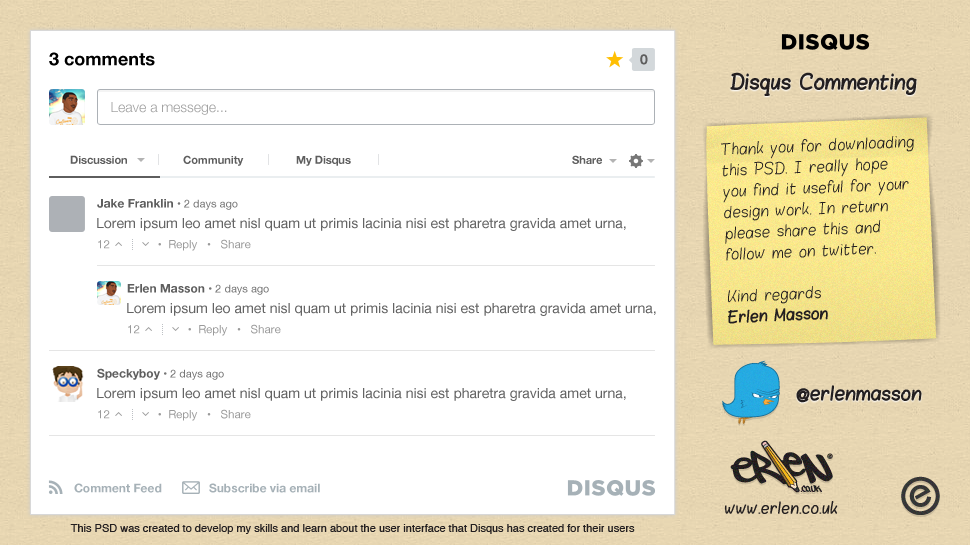
<style>
.page{position:relative;width:970px;height:545px;background:#ffffff}
.page>*{position:absolute;margin:0}
.t1{font:18px "HelveticaNeue-Bold";color:#000000}
.t2{font:14px "HelveticaNeue-Bold";color:#5e5e5e}
.t3{font:17px "Blokletters-Viltstift";letter-spacing:-0.005em;color:#231f20}
.t4{font:14px "HelveticaNeue-Light";color:#a2a2a2}
.t5{font:13px/21px "Blokletters-Balpen";letter-spacing:-0.005em;color:#231f20}
.t6{font:13px/21px "Blokletters-Viltstift";letter-spacing:-0.005em;color:#231f20}
.t7{font:11px "HelveticaNeue-Bold";color:#5e5e5e}
.t8{font:12px "HelveticaNeue-Bold";color:#5e5e5e}
.t9{font:11px "HelveticaNeue";color:#777777}
.t10{font:14px "HelveticaNeue";color:#646464}
.t11{font:11.5px "HelveticaNeue";color:#9a9a9a}
.t12{font:15.8px "Blokletters-Viltstift";letter-spacing:-0.005em;color:#231f20}
.t13{font:12px "HelveticaNeue-Bold";color:#a6b1b7}
.t14{font:13px "Blokletters-Balpen";letter-spacing:-0.005em;color:#231f20;font-weight:bold}
.t15{font:13px "Blokletters-Balpen";letter-spacing:-0.005em;color:#231f20}
.t16{font:11px "Helvetica";color:#231f20}
</style>
<div class="page">
<p class="t1" style="left:49px;top:52px;width:106px;height:14px">3 comments</p>
<p class="t2" style="left:640px;top:54px;width:8px;height:11px">0</p>
<p class="t3" style="left:730px;top:72px;width:187px;height:24px">Disqus Commenting</p>
<p class="t4" style="left:111px;top:102px;width:116px;height:13px">Leave a messege...</p>
<p class="t5" style="left:721px;top:136px;width:193px;height:188px;rotate:-2deg">Thank you for downloading this PSD. I really hope you find it useful for your design work. In return please share this and follow me on twitter.<br><br>Kind regards<br><span class="t6">Erlen Masson</span></p>
<p class="t7" style="left:70px;top:155px;width:57px;height:9px">Discussion</p>
<p class="t7" style="left:183px;top:155px;width:61px;height:11px">Community</p>
<p class="t7" style="left:296px;top:155px;width:55px;height:11px">My Disqus</p>
<p class="t7" style="left:572px;top:155px;width:30px;height:9px">Share</p>
<p class="t8" style="left:97px;top:199px;width:141px;height:11px">Jake Franklin <span class="t9">• 2 days ago</span></p>
<p class="t10" style="left:97px;top:218px;width:529px;height:13px">Lorem ipsum leo amet nisl quam ut primis lacinia nisi est pharetra gravida amet urna, taciti eros lectus arcu malesuada</p>
<p class="t11" style="left:98px;top:239px;width:153px;height:12px">12               •  Reply   •   Share</p>
<p class="t8" style="left:127px;top:284px;width:142px;height:11px">Erlen Masson <span class="t9">• 2 days ago</span></p>
<p class="t10" style="left:127px;top:303px;width:529px;height:13px">Lorem ipsum leo amet nisl quam ut primis lacinia nisi est pharetra gravida amet urna, taciti eros lectus arcu malesuada</p>
<p class="t11" style="left:128px;top:324px;width:153px;height:12px">12               •  Reply   •   Share</p>
<p class="t9" style="left:97px;top:368px;width:127px;height:12px"><span class="t8">Speckyboy </span>• 2 days ago</p>
<p class="t10" style="left:97px;top:388px;width:529px;height:13px">Lorem ipsum leo amet nisl quam ut primis lacinia nisi est pharetra gravida amet urna, taciti eros lectus arcu malesuada</p>
<p class="t12" style="left:796px;top:385px;width:126px;height:18px">@erlenmasson</p>
<p class="t11" style="left:98px;top:409px;width:153px;height:12px">12               •  Reply   •   Share</p>
<p class="t13" style="left:74px;top:483px;width:88px;height:10px">Comment Feed</p>
<p class="t13" style="left:209px;top:483px;width:111px;height:10px">Subscribe via email</p>
<p class="t14" style="left:725px;top:501px;width:113px;height:13px"><span class="t15"><br></span>www.erlen.co.uk</p>
<p class="t16" style="left:70px;top:524px;width:565px;height:10px">This PSD was created to develop my skills and learn about the user interface that Disqus has created for their users</p>
</div>
